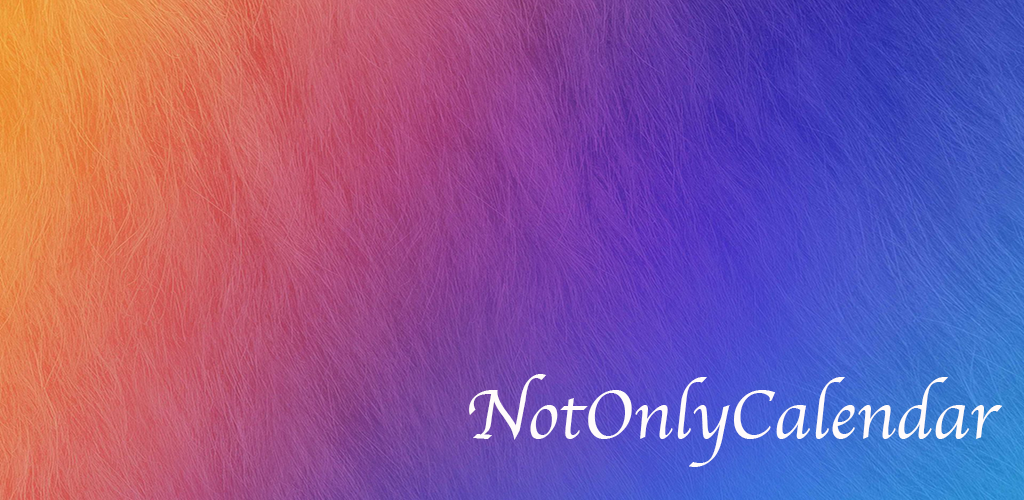
<style>
.page{position:relative;width:1024px;height:500px}
.page>*{position:absolute;margin:0}
.t1{font:71px "Apple-Chancery";color:#fffbfb}
</style>
<div class="page">
<p class="t1" style="left:469px;top:374px;width:533px;height:93px">NotOnlyCalendar</p>
</div>
